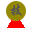
<style>
.page{position:relative;width:32px;height:32px;background:#ffffff}
.page>*{position:absolute;margin:0}
.t1{font:14px "STXingkai";color:#515151}
</style>
<div class="page">
<p class="t1" style="left:10px;top:4px;width:12px;height:12px">技</p>
</div>
